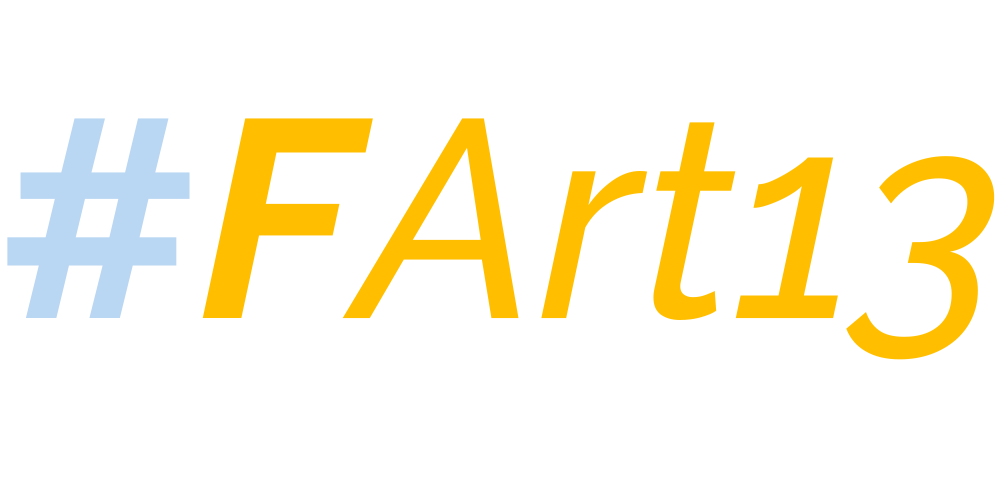
<style>
.page{position:relative;width:1000px;height:500px;background:#ffffff}
.page>*{position:absolute;margin:0}
.t1{font:281.5px "Raleway-MediumItalic";color:#ffbf00}
.t2{font:281.5px "Raleway-Bold";color:#b9d6f2}
.t3{font:281.5px "Raleway-BoldItalic";color:#ffbf00}
</style>
<div class="page">
<p class="t1" style="left:7px;top:118px;width:988px;height:242px"><span class="t2">#</span><span class="t3">F</span>Art13</p>
</div>
